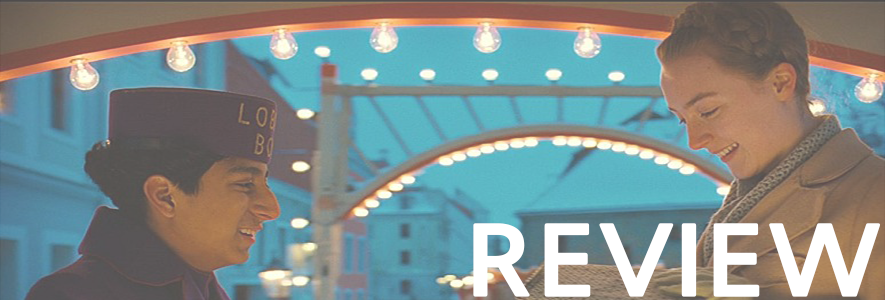
<style>
.page{position:relative;width:885px;height:300px}
.page>*{position:absolute;margin:0}
.t1{font:94.7px "NanumGothicBold";color:#ffffff;font-weight:bold;scale:1.14 1}
</style>
<div class="page">
<p class="t1" style="left:473px;top:223px;width:407px;height:74px">REVIEW</p>
</div>
